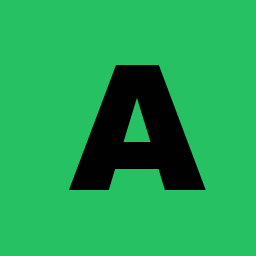
<style>
.page{position:relative;width:256px;height:256px;background:#25c163}
.page>*{position:absolute;margin:0}
.t1{font:174.7px "Arial-Black";color:#010101}
</style>
<div class="page">
<p class="t1" style="left:69px;top:65px;width:137px;height:125px">A</p>
</div>
